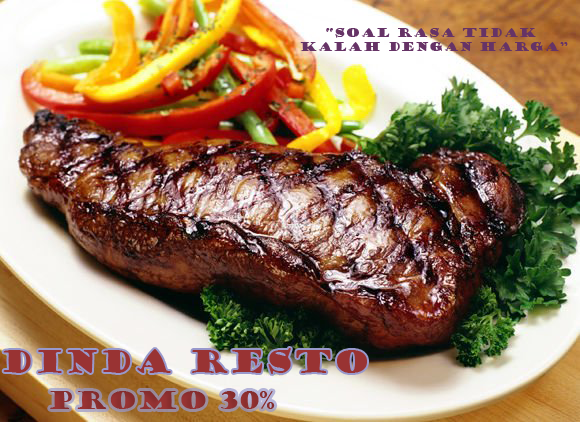
<style>
.page{position:relative;width:580px;height:422px}
.page>*{position:absolute;margin:0}
.t1{font:12px "GoudyStout";color:#663366}
.t2{font:30px "GoudyStout";color:#993333}
.t3{font:24px "GoudyStout";color:#993333}
</style>
<div class="page">
<p class="t1" style="left:300px;top:28px;width:268px;height:23px;text-align:center">“soal rasa tidak <br>kalah dengan harga”</p>
<p class="t2" style="left:3px;top:348px;width:364px;height:26px">Dinda Resto</p>
<p class="t3" style="left:50px;top:391px;width:225px;height:18px">promo 30%</p>
</div>
